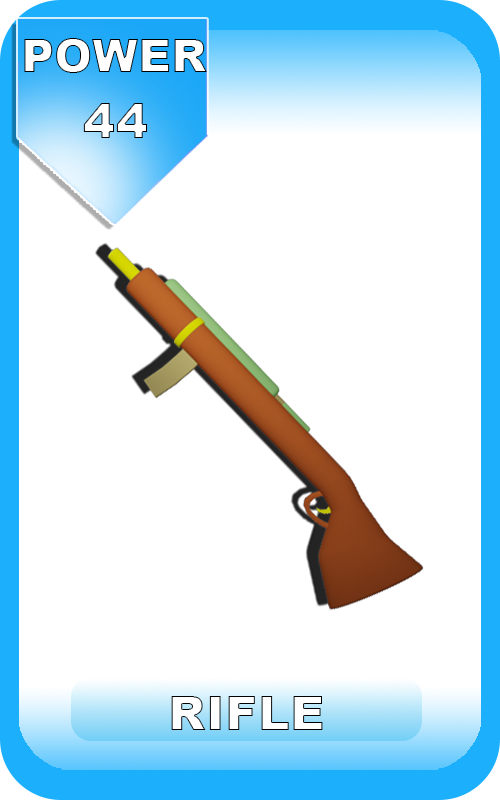
<style>
.page{position:relative;width:500px;height:800px;background:#ffffff}
.page>*{position:absolute;margin:0}
.t1{font:46px "Arial-Black";color:#ffffff}
.t2{font:48px "Arial-Black";letter-spacing:0.01em;color:#ffffff}
</style>
<div class="page">
<p class="t1" style="left:24px;top:38px;width:183px;height:35px">POWER</p>
<p class="t2" style="left:83px;top:103px;width:64px;height:35px">44</p>
</div>
